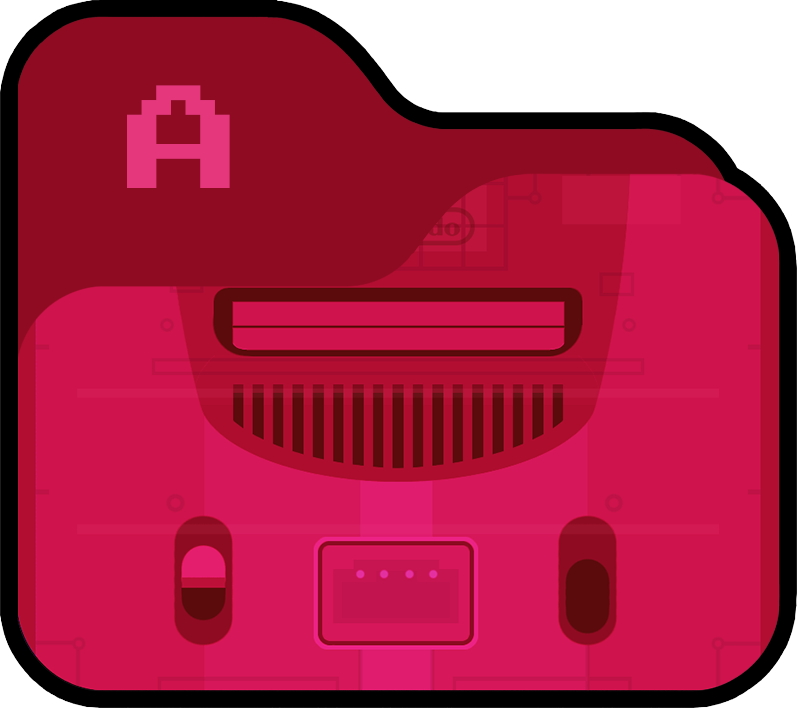
<style>
.page{position:relative;width:797px;height:708px;background:#cf134c}
.page>*{position:absolute;margin:0}
.t1{font:150px "PixelEmulator";color:#e4377c}
</style>
<div class="page">
<p class="t1" style="left:127px;top:85px;width:103px;height:103px">A</p>
</div>
